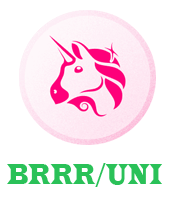
<style>
.page{position:relative;width:178px;height:200px;background:#ffffff}
.page>*{position:absolute;margin:0}
.t1{font:30px "LatinWide";color:#2ac158;scale:0.5 1}
</style>
<div class="page">
<p class="t1" style="left:7px;top:163px;width:155px;height:24px">BRRR/UNI</p>
</div>
